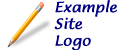
<style>
.page{position:relative;width:120px;height:50px;background:#ffffff}
.page>*{position:absolute;margin:0}
.t1{font:14px "LucidaCasualItalic";color:#000080;font-weight:bold}
</style>
<div class="page">
<p class="t1" style="left:54px;top:0px;width:63px;height:51px">Example<br>Site<br>Logo</p>
</div>
